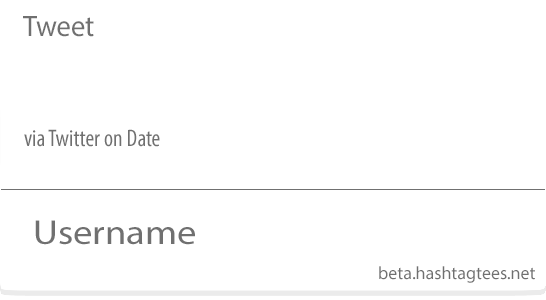
<style>
.page{position:relative;width:546px;height:300px;background:#ffffff}
.page>*{position:absolute;margin:0}
.t1{font:29.7px "MyriadPro-Regular";color:#707070;scale:0.96 1}
.t2{font:24px "MyriadPro-Cond";color:#707070}
.t3{font:34.7px "MyriadPro-Regular";color:#707070;scale:1.11 1}
.t4{font:18px "MyriadPro-Regular";color:#707070}
</style>
<div class="page">
<p class="t1" style="left:23px;top:16px;width:71px;height:21px">Tweet</p>
<p class="t2" style="left:24px;top:129px;width:136px;height:18px">via Twitter on Date</p>
<p class="t3" style="left:35px;top:220px;width:160px;height:25px">Username</p>
<p class="t4" style="left:379px;top:266px;width:156px;height:17px">beta.hashtagtees.net</p>
</div>
